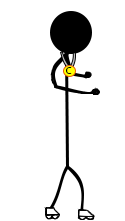
<style>
.page{position:relative;width:125px;height:221px;background:#ffffff}
.page>*{position:absolute;margin:0}
.t1{font:10px "MyriadPro-Regular";color:#000000}
</style>
<div class="page">
<p class="t1" style="left:66px;top:67px;width:6px;height:7px">C</p>
</div>
